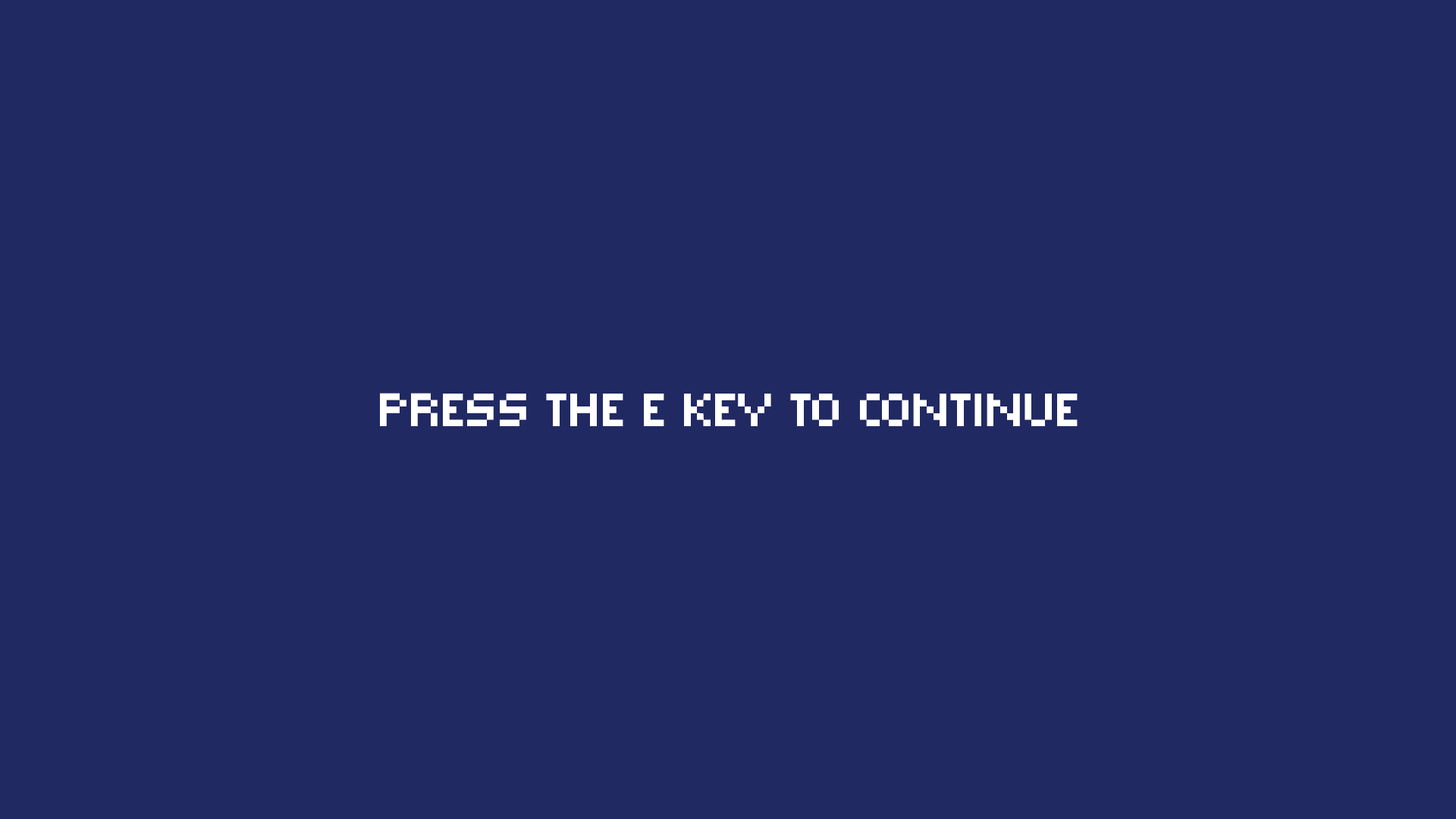
<style>
.page{position:relative;width:1456px;height:819px;background:#212963}
.page>*{position:absolute;margin:0}
.t1{font:46.9px "PixarOne";color:#ffffff}
</style>
<div class="page">
<p class="t1" style="left:380px;top:393px;width:698px;height:33px">press the E key to continue</p>
</div>
